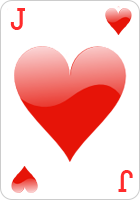
<style>
.page{position:relative;width:140px;height:200px;background:#ffffff}
.page>*{position:absolute;margin:0}
.t1{font:26px "CardCharacters";color:#ff2b2b}
</style>
<div class="page">
<p class="t1" style="left:10px;top:8px;width:15px;height:22px">j</p>
<p class="t1" style="left:118px;top:170px;width:15px;height:22px;rotate:180deg">j</p>
</div>
